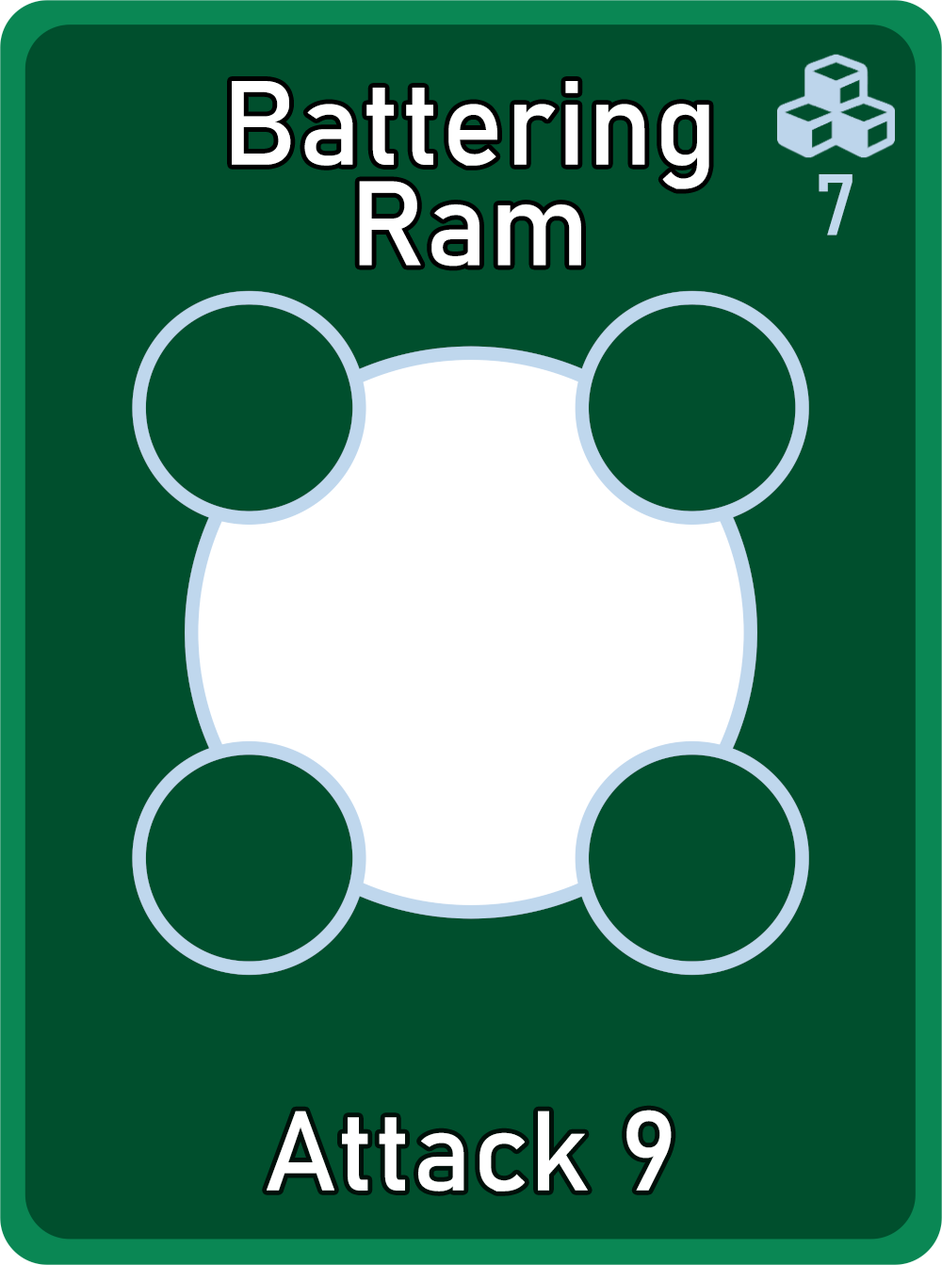
<style>
.page{position:relative;width:942px;height:1265px;background:#004f2d}
.page>*{position:absolute;margin:0}
.t1{font:117.5px/100.5px "Bahnschrift";letter-spacing:0.01em;color:#ffffff}
.t2{font:85px "Bahnschrift";letter-spacing:0.01em;color:#c1d8ed}
.t3{font:111.3px "Bahnschrift";letter-spacing:0.01em;color:#ffffff}
</style>
<div class="page">
<p class="t1" style="left:232px;top:81px;width:478px;height:186px;text-align:center">Battering<br>Ram</p>
<p class="t2" style="left:819px;top:174px;width:34px;height:62px">7</p>
<p class="t3" style="left:267px;top:1110px;width:405px;height:82px">Attack 9</p>
</div>
